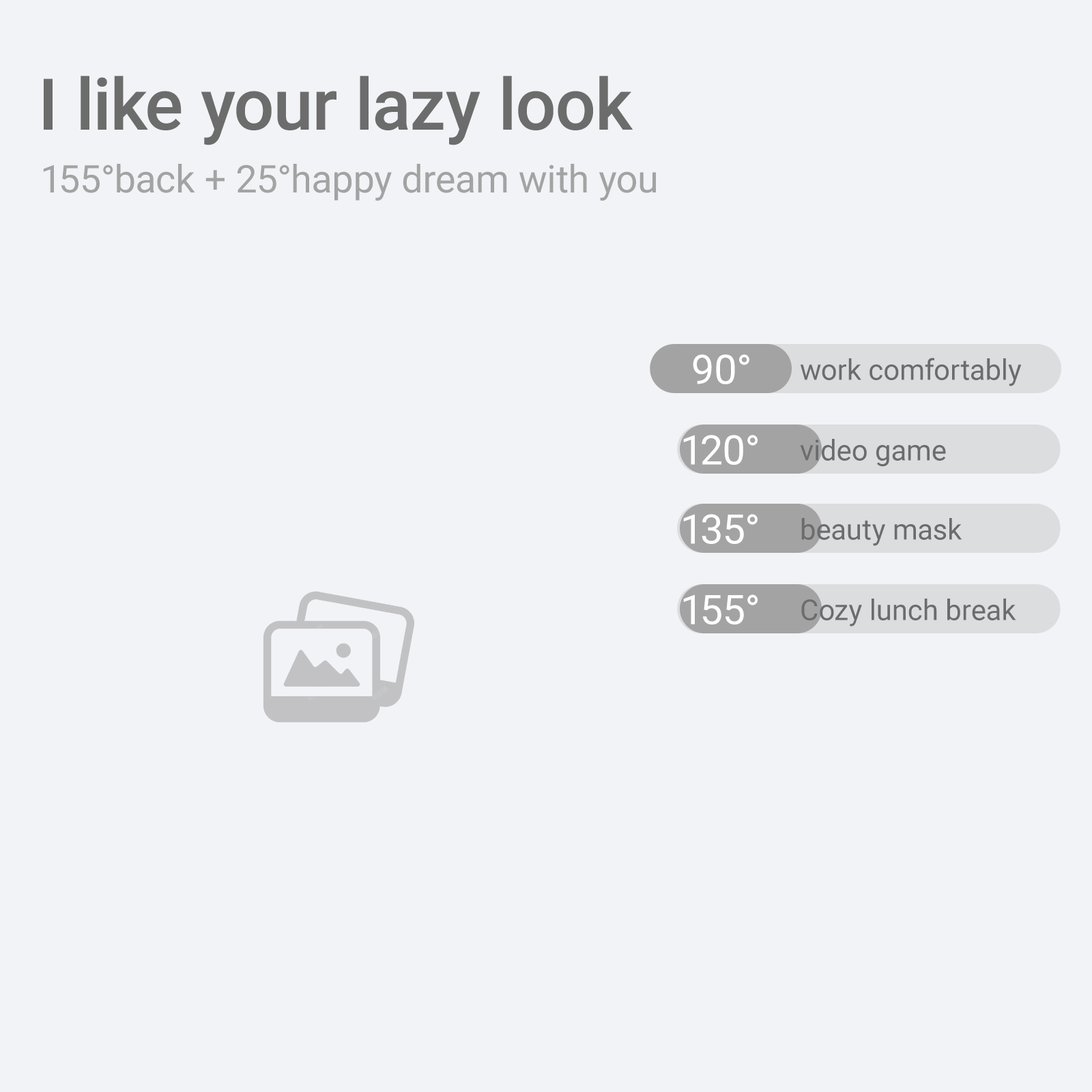
<style>
.page{position:relative;width:1092px;height:1092px;background:#f2f3f6}
.page>*{position:absolute;margin:0}
.t1{font:71.3px "Roboto-Medium";color:#6c6c6c}
.t2{font:38.2px "Roboto-Regular";color:#a3a3a3}
.t3{font:40.8px "Roboto-Regular";color:#ffffff}
.t4{font:28.7px "Roboto-Regular";color:#6c6c6c}
</style>
<div class="page">
<p class="t1" style="left:44px;top:76px;width:589px;height:69px">I like your lazy look</p>
<p class="t2" style="left:43px;top:164px;width:613px;height:37px">155°back + 25°happy dream with you</p>
<p class="t3" style="left:693px;top:354px;width:56px;height:30px">90°</p>
<p class="t4" style="left:800px;top:358px;width:222px;height:28px">work comfortably</p>
<p class="t3" style="left:683px;top:435px;width:75px;height:30px">120°</p>
<p class="t4" style="left:800px;top:439px;width:146px;height:28px">video game</p>
<p class="t3" style="left:683px;top:514px;width:75px;height:30px">135°</p>
<p class="t4" style="left:801px;top:518px;width:161px;height:28px">beauty mask</p>
<p class="t3" style="left:683px;top:594px;width:75px;height:30px">155°</p>
<p class="t4" style="left:801px;top:599px;width:215px;height:28px">Cozy lunch break</p>
</div>
